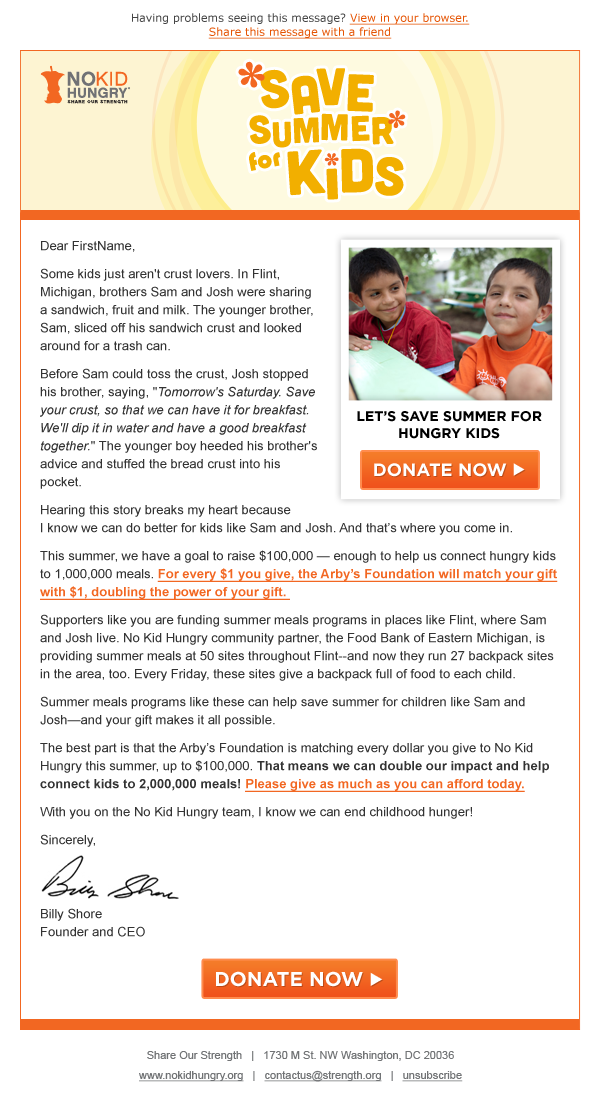
<style>
.page{position:relative;width:600px;height:1098px;background:#ffffff}
.page>*{position:absolute;margin:0}
.t1{font:11px/14px "Verdana";color:#444444}
.t2{font:11px/14px "Verdana";color:#e55302;text-decoration:underline}
.t3{font:11px/14px "Verdana";color:#e55302}
.t4{font:13px/18px "ArialMT";color:#333333}
.t5{font:13px/18px "Arial-ItalicMT";color:#333333}
.t6{font:13px/18px "Arial-BoldMT";color:#f26722;text-decoration:underline}
.t7{font:13px/18px "Arial-BoldMT";color:#333333}
.t8{font:14px "Gotham-Bold";color:#000000;text-transform:uppercase}
.t9{font:18px "Gotham-Bold";color:#ffffff;text-transform:uppercase}
.t10{font:15px "Wingdings3";color:#ffffff}
.t11{font:20px "Gotham-Bold";color:#ffffff;text-transform:uppercase}
.t12{font:16px "Wingdings3";color:#ffffff}
.t13{font:11px/12px "ArialMT";color:#717375}
.t14{font:11px/15px "ArialMT";color:#717375;text-decoration:underline}
.t15{font:11px/15px "ArialMT";color:#717375}
</style>
<div class="page">
<p class="t1" style="left:132px;top:13px;width:338px;height:26px;text-align:center">Having problems seeing this message? <span class="t2">View in your browser.</span><span class="t3"><br></span><span class="t2">Share this message with a friend</span></p>
<p class="t4" style="left:40px;top:241px;width:518px;height:696px">Dear FirstName,<br>Some kids just aren't crust lovers. In Flint, Michigan, brothers Sam and Josh were sharing a sandwich, fruit and milk. The younger brother, Sam, sliced off his sandwich crust and looked around for a trash can. <br>Before Sam could toss the crust, Josh stopped his brother, saying, "<span class="t5">Tomorrow's Saturday. Save your crust, so that we can have it for breakfast. We'll dip it in water and have a good breakfast together.</span>" The younger boy heeded his brother's advice and stuffed the bread crust into his pocket. <br>Hearing this story breaks my heart because <br>I know we can do better for kids like Sam and Josh. And that’s where you come in. <br>This summer, we have a goal to raise $100,000 — enough to help us connect hungry kids to 1,000,000 meals. <span class="t6">For every $1 you give, the Arby’s Foundation will match your gift with $1, doubling the power of your gift. <br></span>Supporters like you are funding summer meals programs in places like Flint, where Sam and Josh live. No Kid Hungry community partner, the Food Bank of Eastern Michigan, is providing summer meals at 50 sites throughout Flint--and now they run 27 backpack sites in the area, too. Every Friday, these sites give a backpack full of food to each child. <br>Summer meals programs like these can help save summer for children like Sam and Josh—and your gift makes it all possible.<br>The best part is that the Arby’s Foundation is matching every dollar you give to No Kid Hungry this summer, up to $100,000. <span class="t7">That means we can double our impact and help connect kids to 2,000,000 meals! </span><span class="t6">Please give as much as you can afford today.<br></span>With you on the No Kid Hungry team, I know we can end childhood hunger!<br>Sincerely,<br><br><br>Billy Shore<br>Founder and CEO</p>
<p class="t8" style="left:357px;top:411px;width:185px;height:28px;text-align:center">Let’s Save Summer for Hungry Kids</p>
<p class="t9" style="left:374px;top:463px;width:151px;height:14px">donate now <span class="t10">u</span></p>
<p class="t11" style="left:216px;top:971px;width:167px;height:16px">DONATE now <span class="t12">u</span></p>
<p class="t13" style="left:139px;top:1051px;width:324px;height:31px;text-align:center">Share Our Strength   |   1730 M St. NW Washington, DC 20036<br><span class="t14">www.nokidhungry.org</span><span class="t15">   |   </span><span class="t14">contactus@strength.org</span><span class="t15">   |   </span><span class="t14">unsubscribe</span></p>
</div>
